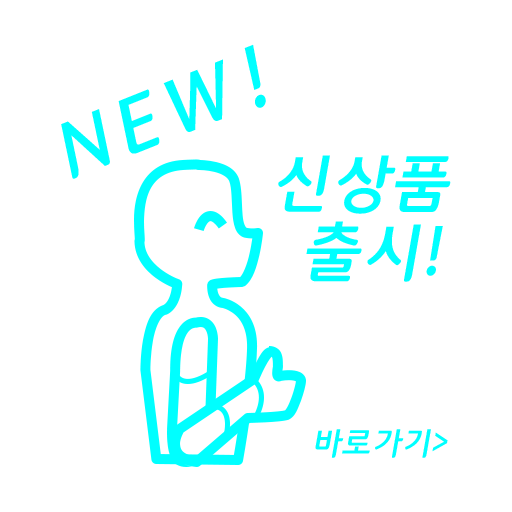
<style>
.page{position:relative;width:512px;height:512px;background:#ffffff}
.page>*{position:absolute;margin:0}
.t1{font:79px "12LotteMartDreamBold";letter-spacing:0.16em;color:#00ffff;font-style:italic}
.t2{font:64px/69px "12LotteMartDreamBold";letter-spacing:0.04em;color:#00ffff;font-style:italic}
.t3{font:32px "12LotteMartDreamBold";letter-spacing:0.04em;color:#00ffff;font-style:italic}
</style>
<div class="page">
<p class="t1" style="left:61px;top:44px;width:205px;height:135px;rotate:-22deg">NEW!</p>
<p class="t2" style="left:278px;top:155px;width:173px;height:127px;text-align:center">신상품<br> 출시!</p>
<p class="t3" style="left:315px;top:429px;width:133px;height:29px">바로가기&gt;</p>
</div>
